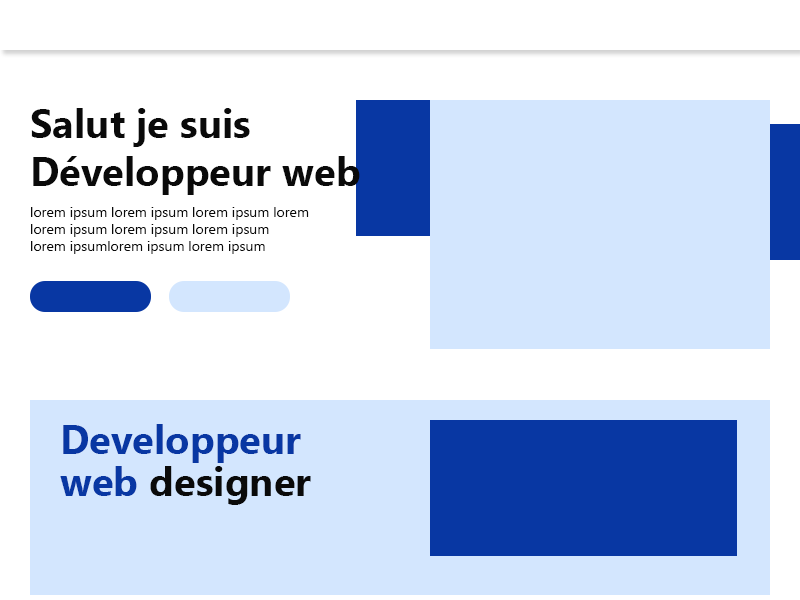
<style>
.page{position:relative;width:800px;height:600px;background:#ffffff}
.page>*{position:absolute;margin:0}
.t1{font:40px "SegoeUI-Bold";color:#0a0a0a}
.t2{font:14px "SegoeUI";color:#0a0a0a}
.t3{font:40px/42px "SegoeUI-Bold";color:#0837a3}
.t4{font:40px/42px "SegoeUI-Bold";color:#0a0a0a}
</style>
<div class="page">
<p class="t1" style="left:31px;top:108px;width:329px;height:87px">Salut je suis<br>Développeur web</p>
<p class="t2" style="left:31px;top:207px;width:278px;height:47px">lorem ipsum lorem ipsum lorem ipsum lorem<br>lorem ipsum lorem ipsum lorem ipsum<br>lorem ipsumlorem ipsum lorem ipsum</p>
<p class="t3" style="left:60px;top:424px;width:251px;height:81px">Developpeur<br>web <span class="t4">designer</span></p>
</div>
